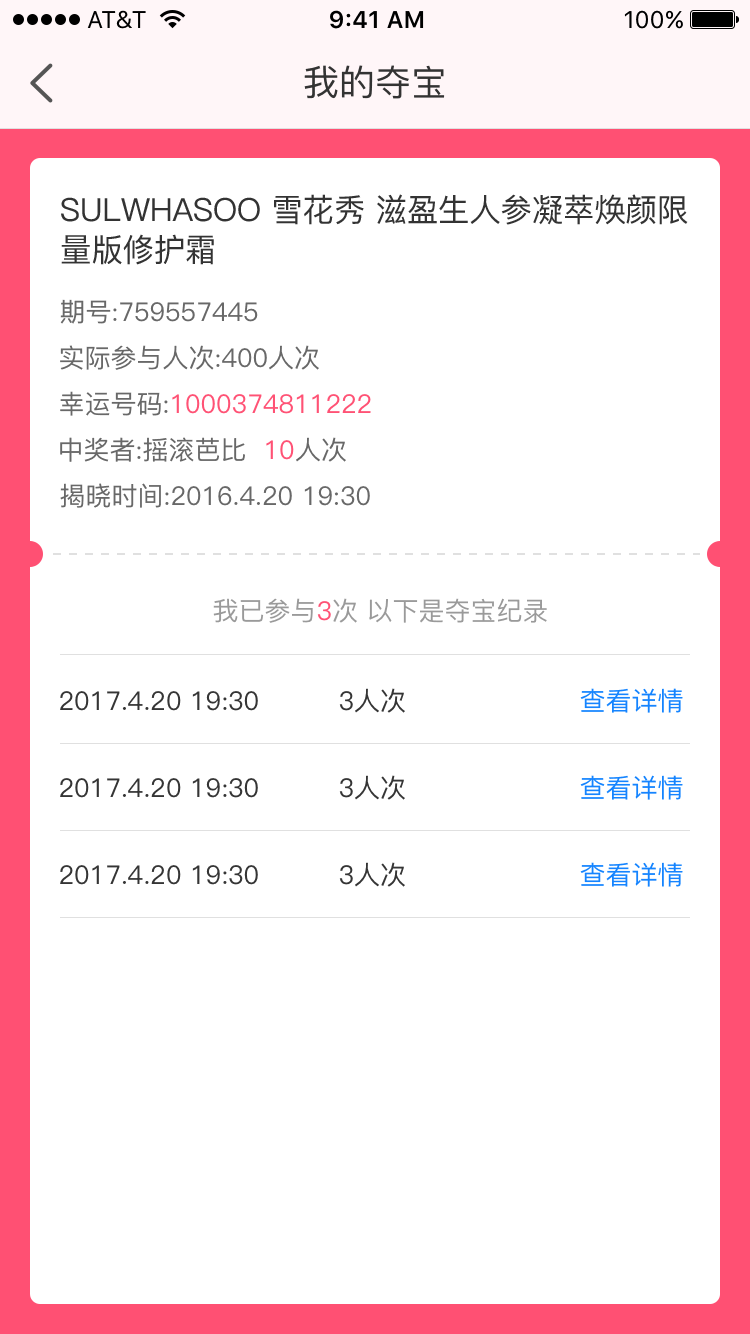
<style>
.page{position:relative;width:750px;height:1334px;background:#ffffff}
.page>*{position:absolute;margin:0}
.t1{font:36px "PingFang-SC-Medium";color:#333333}
.t2{font:32px/40px "PingFang-SC-Medium";color:#333333}
.t3{font:26px "PingFang-SC-Medium";color:#666666}
.t4{font:26px "PingFang-SC-Medium";color:#ff5073}
.t5{font:26px "PingFang-SC-Medium";color:#999999}
.t6{font:26px "PingFang-SC-Medium";color:#333333}
.t7{font:26px "PingFang-SC-Medium";color:#1283ff}
</style>
<div class="page">
<p class="t1" style="left:304px;top:65px;width:141px;height:34px">我的夺宝</p>
<p class="t2" style="left:61px;top:194px;width:627px;height:71px">SULWHASOO 雪花秀 滋盈生人参凝萃焕颜限量版修护霜</p>
<p class="t3" style="left:60px;top:299px;width:198px;height:25px">期号:759557445</p>
<p class="t3" style="left:60px;top:345px;width:259px;height:25px">实际参与人次:400人次</p>
<p class="t4" style="left:60px;top:391px;width:311px;height:25px"><span class="t3">幸运号码:</span>1000374811222</p>
<p class="t3" style="left:60px;top:437px;width:286px;height:25px">中奖者:摇滚芭比  <span class="t4">10</span>人次</p>
<p class="t3" style="left:60px;top:483px;width:310px;height:25px">揭晓时间:2016.4.20 19:30</p>
<p class="t5" style="left:213px;top:598px;width:334px;height:25px">我已参与<span class="t4">3</span>次 以下是夺宝纪录</p>
<p class="t6" style="left:339px;top:688px;width:66px;height:25px">3人次</p>
<p class="t7" style="left:580px;top:688px;width:103px;height:25px">查看详情</p>
<p class="t6" style="left:60px;top:691px;width:198px;height:20px">2017.4.20 19:30</p>
<p class="t6" style="left:60px;top:778px;width:198px;height:20px">2017.4.20 19:30</p>
<p class="t6" style="left:339px;top:775px;width:66px;height:25px">3人次</p>
<p class="t7" style="left:580px;top:775px;width:103px;height:25px">查看详情</p>
<p class="t6" style="left:60px;top:865px;width:198px;height:20px">2017.4.20 19:30</p>
<p class="t6" style="left:339px;top:862px;width:66px;height:25px">3人次</p>
<p class="t7" style="left:580px;top:862px;width:103px;height:25px">查看详情</p>
</div>
